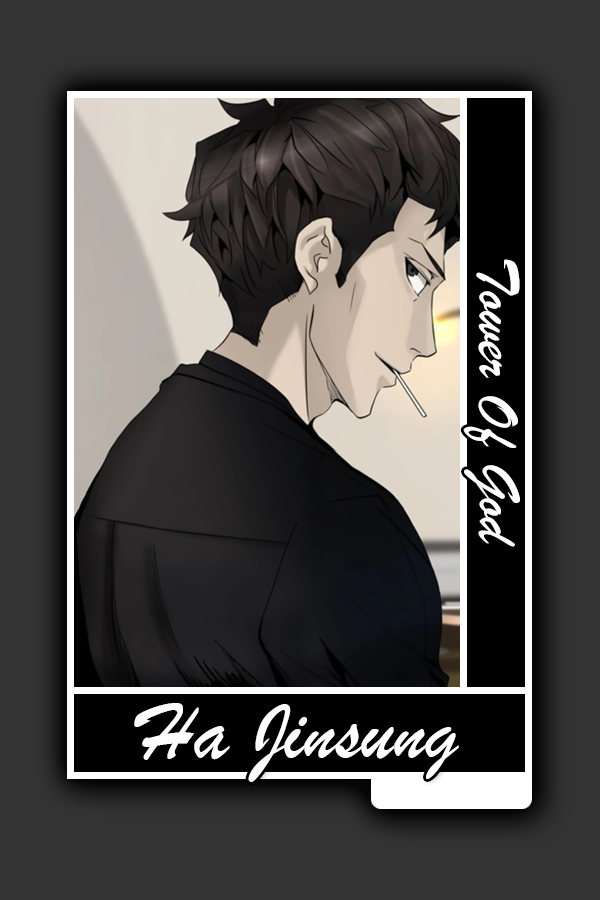
<style>
.page{position:relative;width:600px;height:900px;background:#333333}
.page>*{position:absolute;margin:0}
.t1{font:61.5px "BrushScriptMT";color:#ffffff}
.t2{font:84.8px "BrushScriptMT";color:#ffffff}
</style>
<div class="page">
<p class="t1" style="left:463px;top:259px;width:57px;height:288px;rotate:90deg">Tower Of God</p>
<p class="t2" style="left:134px;top:703px;width:325px;height:79px">Ha Jinsung</p>
</div>
